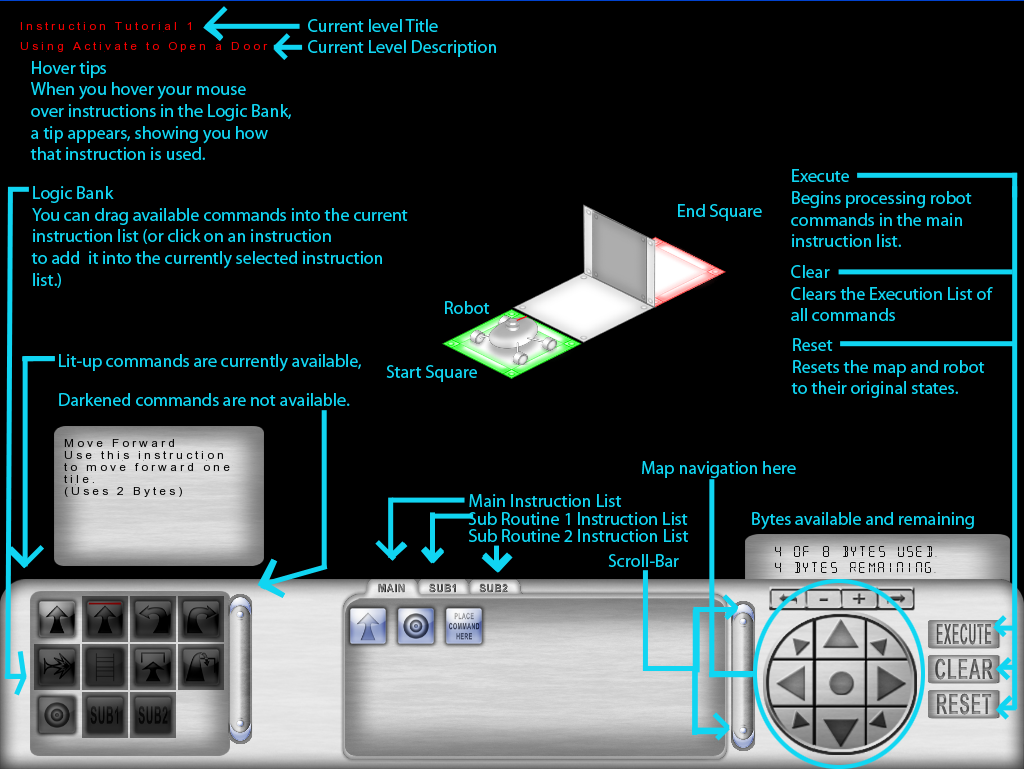
<style>
.page{position:relative;width:1024px;height:769px;background:#000000}
.page>*{position:absolute;margin:0}
.t1{font:18px "MyriadPro-Regular";color:#10d5f2}
</style>
<div class="page">
<p class="t1" style="left:308px;top:19px;width:188px;height:38px">Current level Title<br>Current Level Description</p>
<p class="t1" style="left:30px;top:61px;width:261px;height:99px">Hover tips<br>When you hover your mouse<br>over instructions in the Logic Bank,<br>a tip appears, showing you how<br>that instruction is used.</p>
<p class="t1" style="left:791px;top:169px;width:181px;height:78px">Execute<br>Begins processing robot<br>commands in the main<br>instruction list.</p>
<p class="t1" style="left:31px;top:186px;width:377px;height:102px">Logic Bank<br>You can drag available commands into the current<br>instruction list (or click on an instruction<br>to add  it into the currently selected instruction <br>list.)</p>
<p class="t1" style="left:678px;top:204px;width:84px;height:17px">End Square</p>
<p class="t1" style="left:791px;top:265px;width:202px;height:56px">Clear<br>Clears the Execution List of<br>all commands</p>
<p class="t1" style="left:445px;top:301px;width:45px;height:13px">Robot</p>
<p class="t1" style="left:791px;top:338px;width:194px;height:60px">Reset<br>Resets the map and robot<br>to their original states.</p>
<p class="t1" style="left:59px;top:354px;width:302px;height:18px">Lit-up commands are currently available,</p>
<p class="t1" style="left:386px;top:365px;width:91px;height:17px">Start Square</p>
<p class="t1" style="left:59px;top:393px;width:291px;height:13px">Darkened commands are not available.</p>
<p class="t1" style="left:642px;top:461px;width:154px;height:17px">Map navigation here</p>
<p class="t1" style="left:469px;top:494px;width:153px;height:13px">Main Instruction List</p>
<p class="t1" style="left:468px;top:512px;width:220px;height:13px">Sub Routine 1 Instruction List</p>
<p class="t1" style="left:752px;top:512px;width:222px;height:18px">Bytes available and remaining</p>
<p class="t1" style="left:469px;top:529px;width:220px;height:13px">Sub Routine 2 Instruction List</p>
<p class="t1" style="left:608px;top:554px;width:71px;height:13px">Scroll-Bar</p>
</div>
